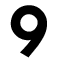
<style>
.page{position:relative;width:64px;height:64px;background:#ffffff}
.page>*{position:absolute;margin:0}
.t1{font:66.7px "(ÇÑ)°¢¸Ó¸®D";color:#000000}
</style>
<div class="page">
<p class="t1" style="left:10px;top:5px;width:37px;height:53px">9</p>
</div>
